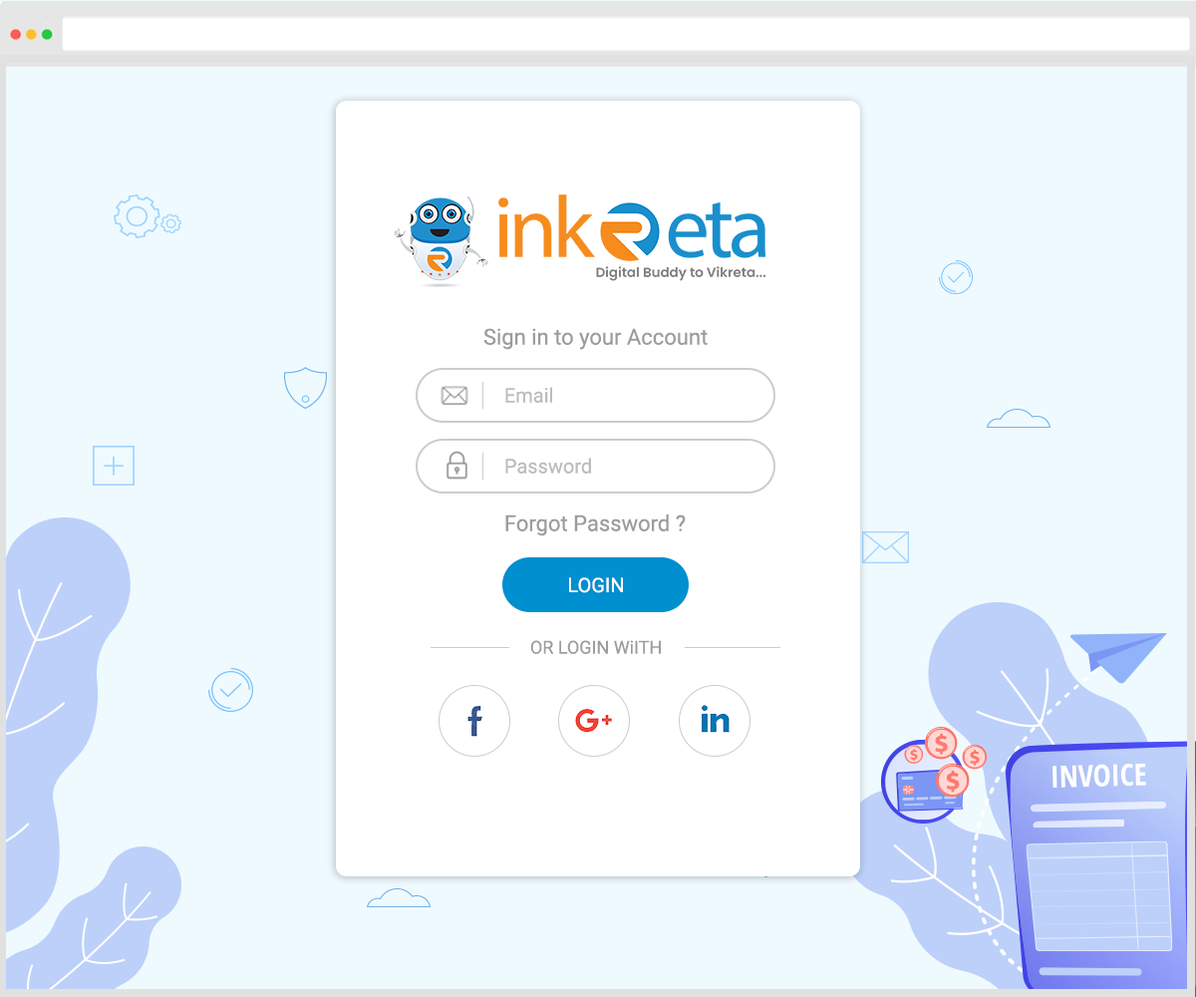
<style>
.page{position:relative;width:1196px;height:997px;background:#effaff}
.page>*{position:absolute;margin:0}
.t1{font:21.9px "Roboto-Regular";color:#9c9c9c}
.t2{font:19.9px "Roboto-Regular";color:#bcbcbc}
.t3{font:19.9px "Roboto-Regular";color:#ffffff}
.t4{font:17.9px "Roboto-Regular";color:#9c9c9c}
</style>
<div class="page">
<p class="t1" style="left:483px;top:328px;width:225px;height:22px">Sign in to your Account</p>
<p class="t2" style="left:505px;top:387px;width:47px;height:16px">Email</p>
<p class="t2" style="left:505px;top:458px;width:86px;height:15px">Password</p>
<p class="t1" style="left:505px;top:514px;width:181px;height:22px">Forgot Password ?</p>
<p class="t3" style="left:569px;top:577px;width:54px;height:16px">LOGIN</p>
<p class="t4" style="left:530px;top:640px;width:131px;height:14px">OR LOGIN WiITH</p>
</div>
